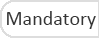
<style>
.page{position:relative;width:99px;height:38px;background:#ffffff}
.page>*{position:absolute;margin:0}
.t1{font:20px "Calibri";color:#353535}
</style>
<div class="page">
<p class="t1" style="left:7px;top:11px;width:89px;height:18px">Mandatory</p>
</div>
